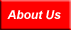
<style>
.page{position:relative;width:71px;height:30px;background:#ff0000}
.page>*{position:absolute;margin:0}
.t1{font:12px "Arial-BoldItalicMT";color:#ffffff}
</style>
<div class="page">
<p class="t1" style="left:7px;top:10px;width:54px;height:10px">About Us</p>
</div>
